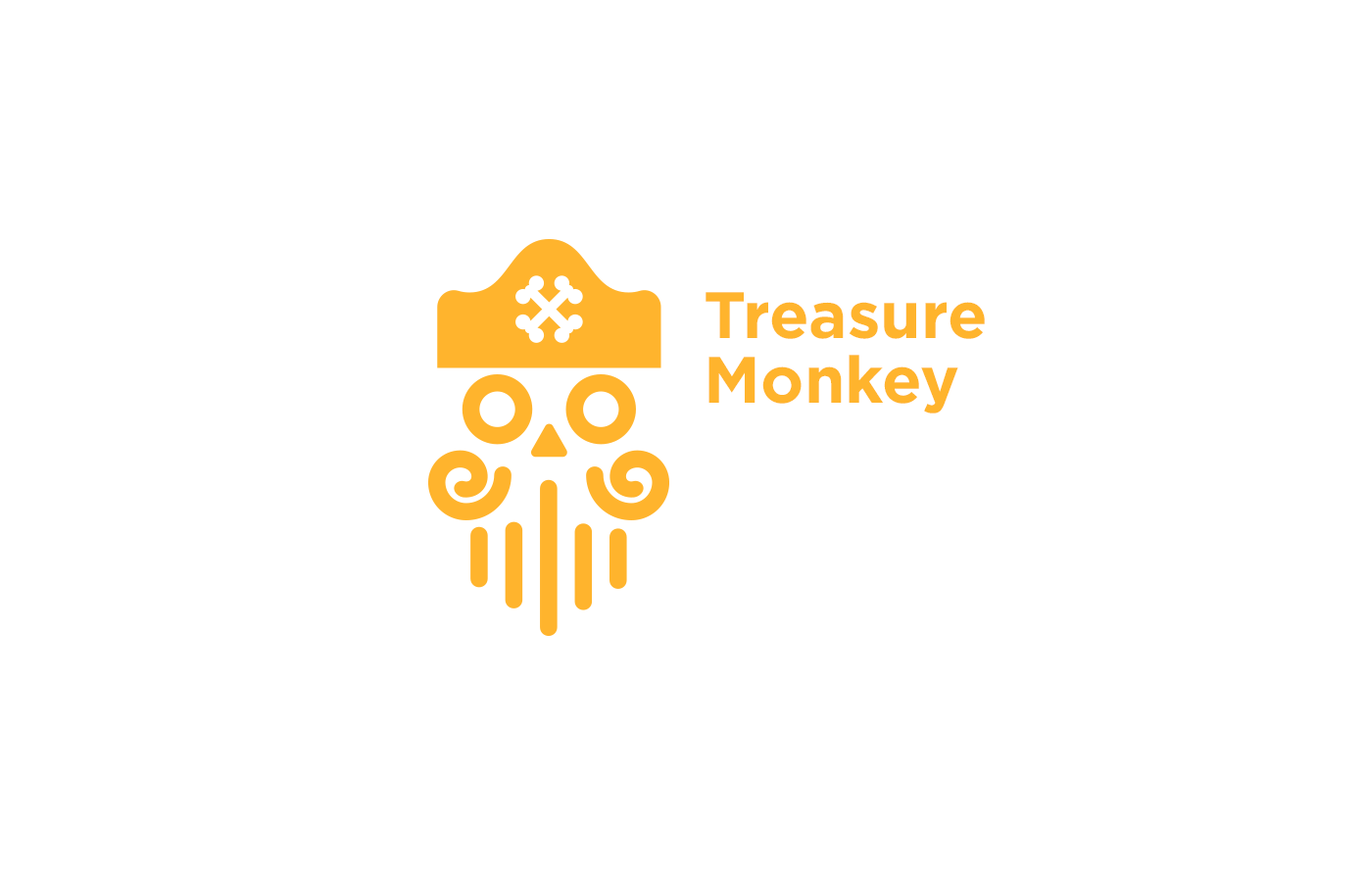
<style>
.page{position:relative;width:1365px;height:874px;background:#ffffff}
.page>*{position:absolute;margin:0}
.t1{font:65.3px/65.3px "Gotham-Bold";color:#ffb42d}
</style>
<div class="page">
<p class="t1" style="left:705px;top:292px;width:280px;height:121px">Treasure<br>Monkey</p>
</div>
